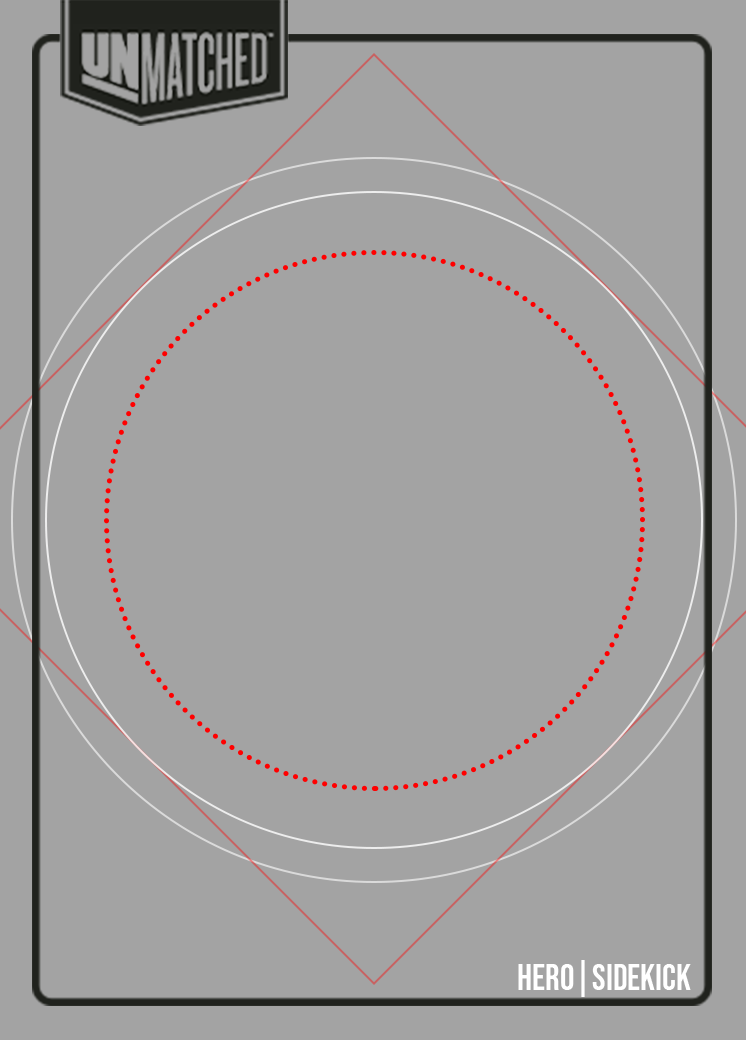
<style>
.page{position:relative;width:746px;height:1040px;background:#a3a3a3}
.page>*{position:absolute;margin:0}
.t1{font:36px "BebasNeue-Regular";color:#ffffff}
</style>
<div class="page">
<p class="t1" style="left:518px;top:960px;width:173px;height:37px">HERO|SIDEKICK</p>
</div>
